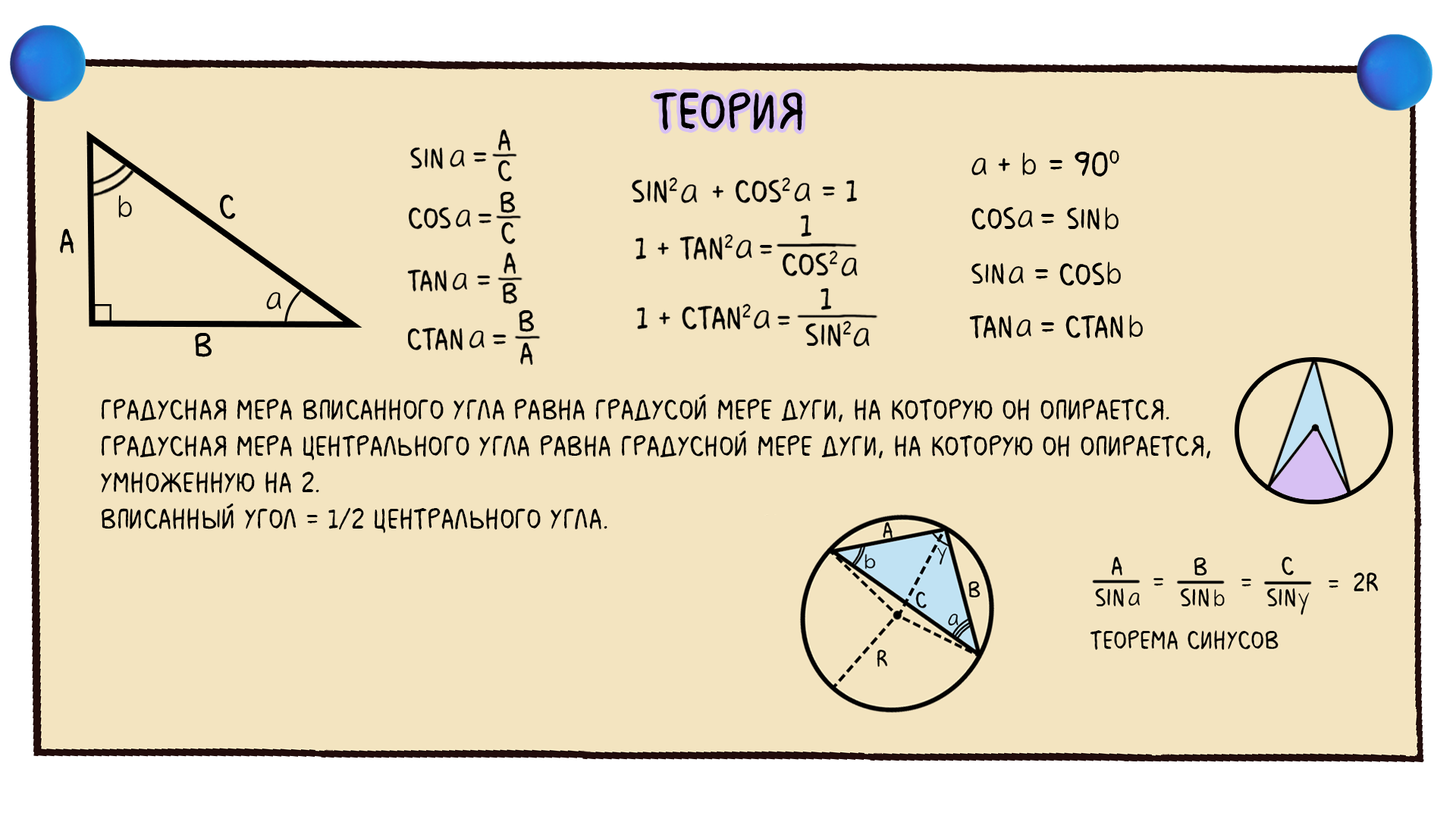
<style>
.page{position:relative;width:1456px;height:819px;background:#f3e4c0}
.page>*{position:absolute;margin:0}
.t1{font:30.3px "MilkMustacheBB";color:#000000}
</style>
<div class="page">
<p class="t1" style="left:101px;top:394px;width:1109px;height:139px">Градусная мера вписанного угла равна градусой мере дуги, на которую он опирается.<br>Градусная мера центрального угла равна градусной мере дуги, на которую он опирается,<br>умноженную на 2.<br>Вписанный угол = 1/2 центрального угла.</p>
</div>
